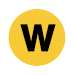
<style>
.page{position:relative;width:75px;height:75px;background:#ffffff}
.page>*{position:absolute;margin:0}
.t1{font:37px "Helvetica-Bold";letter-spacing:-0.05em;color:#000000;font-weight:bold}
</style>
<div class="page">
<p class="t1" style="left:20px;top:24px;width:36px;height:28px">W</p>
</div>
